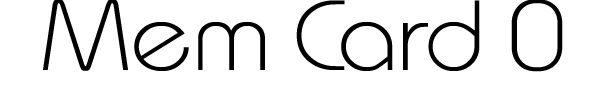
<style>
.page{position:relative;width:598px;height:101px;background:#ffffff}
.page>*{position:absolute;margin:0}
.t1{font:100px "MonaKo";color:#000000;scale:1.1 1}
</style>
<div class="page">
<p class="t1" style="left:43px;top:0px;width:520px;height:72px">Mem Card 0</p>
</div>
